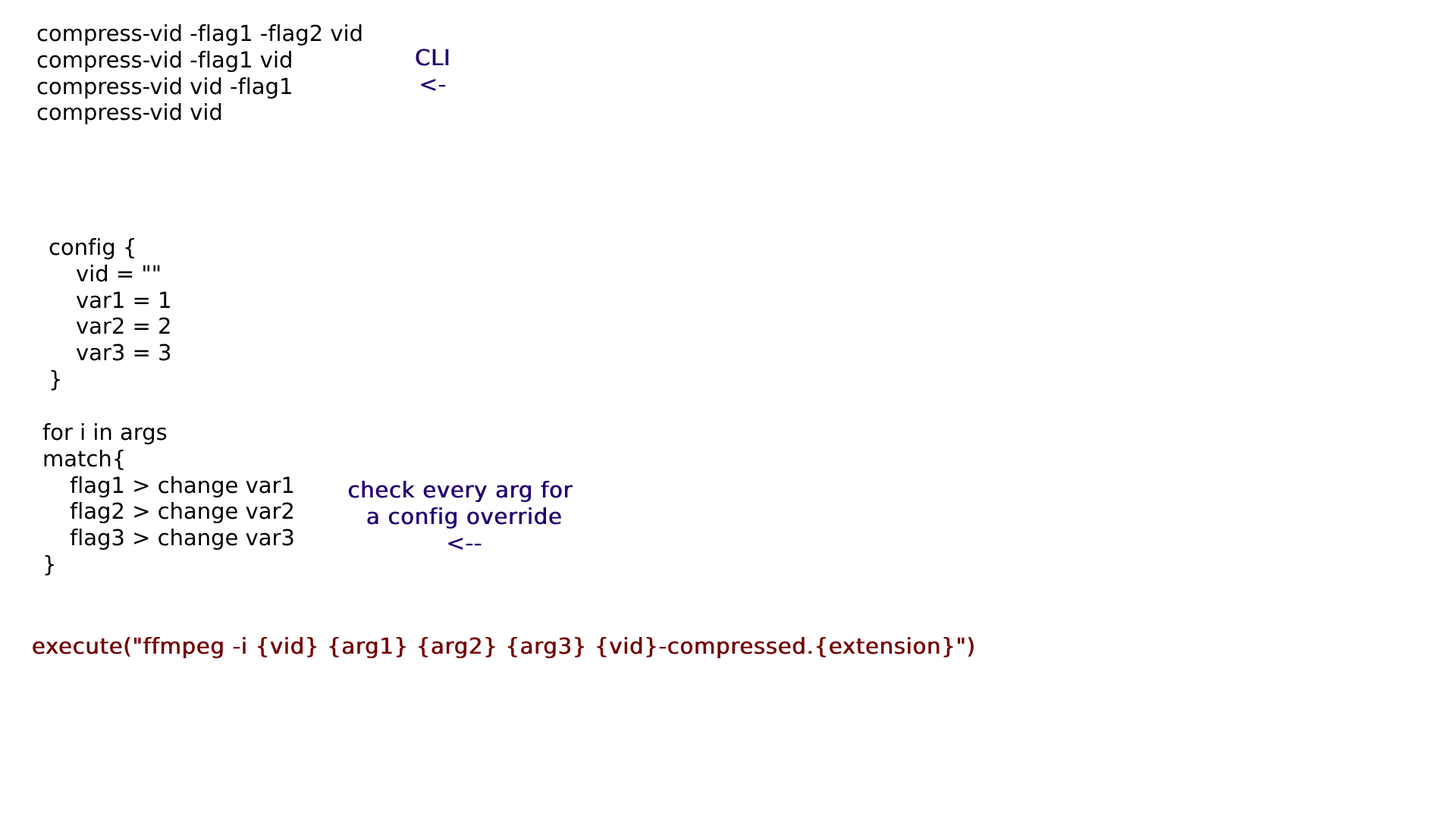
<style>
.page{position:relative;width:1456px;height:819px;background:#ffffff}
.page>*{position:absolute;margin:0}
.t1{font:22px "DejaVuSans";color:#000000}
.t2{font:22px "DejaVuSans";color:#230072;font-weight:bold}
.t3{font:22px "DejaVuSans";color:#720000;font-weight:bold}
</style>
<div class="page">
<p class="t1" style="left:37px;top:24px;width:325px;height:101px">compress-vid -flag1 -flag2 vid<br>compress-vid -flag1 vid<br>compress-vid vid -flag1<br>compress-vid vid</p>
<p class="t2" style="left:416px;top:49px;width:33px;height:42px;text-align:center">CLI<br>&lt;-</p>
<p class="t1" style="left:49px;top:237px;width:122px;height:154px">config {<br> vid = ""<br> var1 = 1<br> var2 = 2<br> var3 = 3<br>}</p>
<p class="t1" style="left:42px;top:422px;width:251px;height:154px">for i in args<br>match{<br> flag1 &gt; change var1<br> flag2 &gt; change var2<br> flag3 &gt; change var3<br>}</p>
<p class="t2" style="left:348px;top:480px;width:225px;height:70px;text-align:center">check every arg for <br>a config override<br>&lt;--</p>
<p class="t3" style="left:33px;top:636px;width:941px;height:23px">execute("ffmpeg -i {vid} {arg1} {arg2} {arg3} {vid}-compressed.{extension}")</p>
</div>
